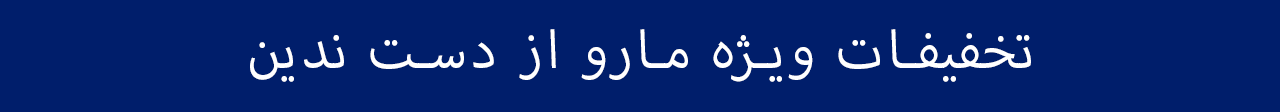
<style>
.page{position:relative;width:1280px;height:112px;background:#001e6b}
.page>*{position:absolute;margin:0}
.t1{font:75px "MyriadArabic-Regular";letter-spacing:0.06em;color:#ffffff;text-transform:uppercase}
</style>
<div class="page">
<p class="t1" style="left:250px;top:29px;width:781px;height:53px">تخفیفات ویژه مارو از دست ندین</p>
</div>
